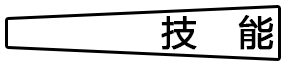
<style>
.page{position:relative;width:286px;height:66px;background:#ffffff}
.page>*{position:absolute;margin:0}
.t1{font:35px "MicrosoftYaHei";letter-spacing:0.06em;color:#000000;font-weight:bold}
</style>
<div class="page">
<p class="t1" style="left:161px;top:15px;width:113px;height:35px">技　能</p>
</div>
